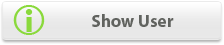
<style>
.page{position:relative;width:224px;height:45px}
.page>*{position:absolute;margin:0}
.t1{font:17.5px "MyriadPro-Bold";color:#61635f}
</style>
<div class="page">
<p class="t1" style="left:92px;top:14px;width:82px;height:13px">Show User</p>
</div>
